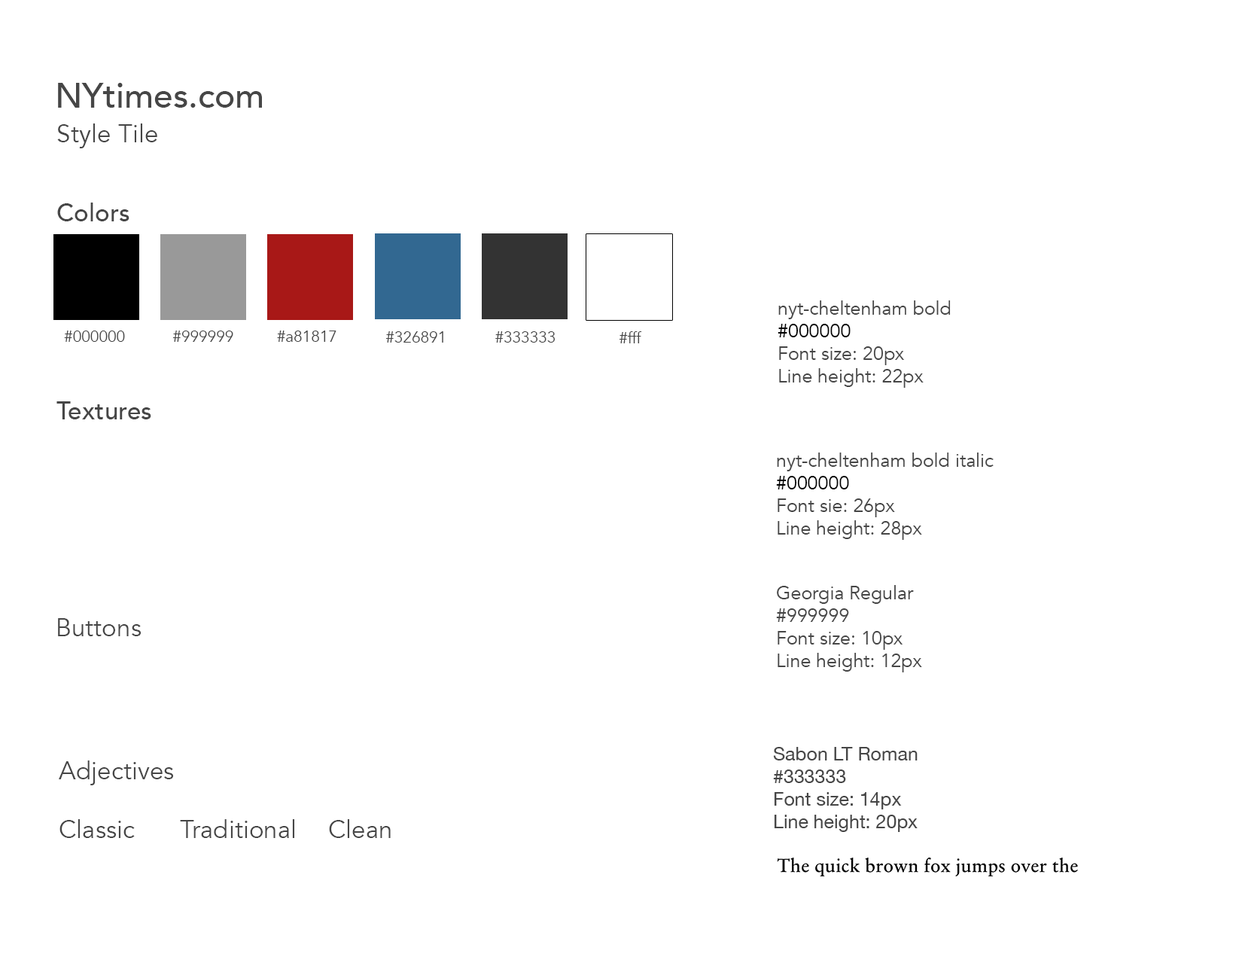
<style>
.page{position:relative;width:1242px;height:960px;background:#ffffff}
.page>*{position:absolute;margin:0}
.t1{font:34.5px "Avenir-Medium";color:#464646}
.t2{font:25.1px "Avenir-Book";color:#464646}
.t3{font:25.1px "Avenir-Medium";color:#464646}
.t4{font:18.8px "Avenir-Book";color:#464646}
.t5{font:18.8px "Avenir-Book";color:#000000}
.t6{font:15.7px "Avenir-Book";color:#464646}
.t7{font:18.8px "HelveticaNeue";color:#464646}
</style>
<div class="page">
<p class="t1" style="left:58px;top:83px;width:204px;height:25px">NYtimes.com</p>
<p class="t2" style="left:57px;top:123px;width:100px;height:25px">Style Tile</p>
<p class="t3" style="left:57px;top:203px;width:72px;height:18px">Colors</p>
<p class="t4" style="left:778px;top:300px;width:173px;height:88px">nyt-cheltenham bold<br><span class="t5">#000000<br></span>Font size: 20px<br>Line height: 22px<br>lin-height:</p>
<p class="t6" style="left:64px;top:331px;width:61px;height:11px">#000000</p>
<p class="t6" style="left:172px;top:331px;width:61px;height:11px">#999999</p>
<p class="t6" style="left:277px;top:331px;width:60px;height:11px">#a81817</p>
<p class="t6" style="left:385px;top:331px;width:58px;height:12px">#326891</p>
<p class="t6" style="left:495px;top:331px;width:61px;height:12px">#333333</p>
<p class="t6" style="left:619px;top:331px;width:23px;height:12px">#fff</p>
<p class="t3" style="left:56px;top:401px;width:95px;height:18px">Textures</p>
<p class="t4" style="left:776px;top:452px;width:218px;height:88px">nyt-cheltenham bold italic<br><span class="t5">#000000<br></span>Font sie: 26px<br>Line height: 28px</p>
<p class="t4" style="left:776px;top:585px;width:146px;height:87px">Georgia Regular<br>#999999<br>Font size: 10px<br>Line height: 12px</p>
<p class="t2" style="left:58px;top:618px;width:83px;height:18px">Buttons</p>
<p class="t7" style="left:773px;top:747px;width:145px;height:85px">Sabon LT Roman<br>#333333<br>Font size: 14px<br>Line height: 20px</p>
<p class="t2" style="left:59px;top:760px;width:114px;height:25px">Adjectives</p>
<p class="t2" style="left:59px;top:819px;width:76px;height:19px">Classic</p>
<p class="t2" style="left:180px;top:819px;width:114px;height:19px">Traditional</p>
<p class="t2" style="left:329px;top:819px;width:62px;height:19px">Clean</p>
</div>
